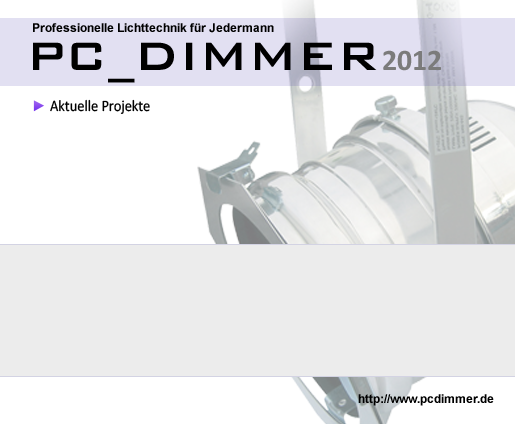
<style>
.page{position:relative;width:515px;height:424px;background:#ffffff}
.page>*{position:absolute;margin:0}
.t1{font:12px "Arial-BoldMT";color:#000000}
.t2{font:52.8px "BankGothicBT-Medium";color:#000000}
.t3{font:30px "Calibri-Bold";color:#7b7b7b}
.t4{font:16px "Calibri";color:#000000;scale:0.9 1}
</style>
<div class="page">
<p class="t1" style="left:33px;top:23px;width:241px;height:10px">Professionelle Lichttechnik für Jedermann</p>
<p class="t2" style="left:33px;top:42px;width:344px;height:41px">PC_DIMMER</p>
<p class="t3" style="left:383px;top:50px;width:58px;height:21px">2012</p>
<p class="t4" style="left:50px;top:99px;width:100px;height:15px">Aktuelle Projekte</p>
<p class="t1" style="left:358px;top:394px;width:136px;height:12px">http://www.pcdimmer.de</p>
</div>
